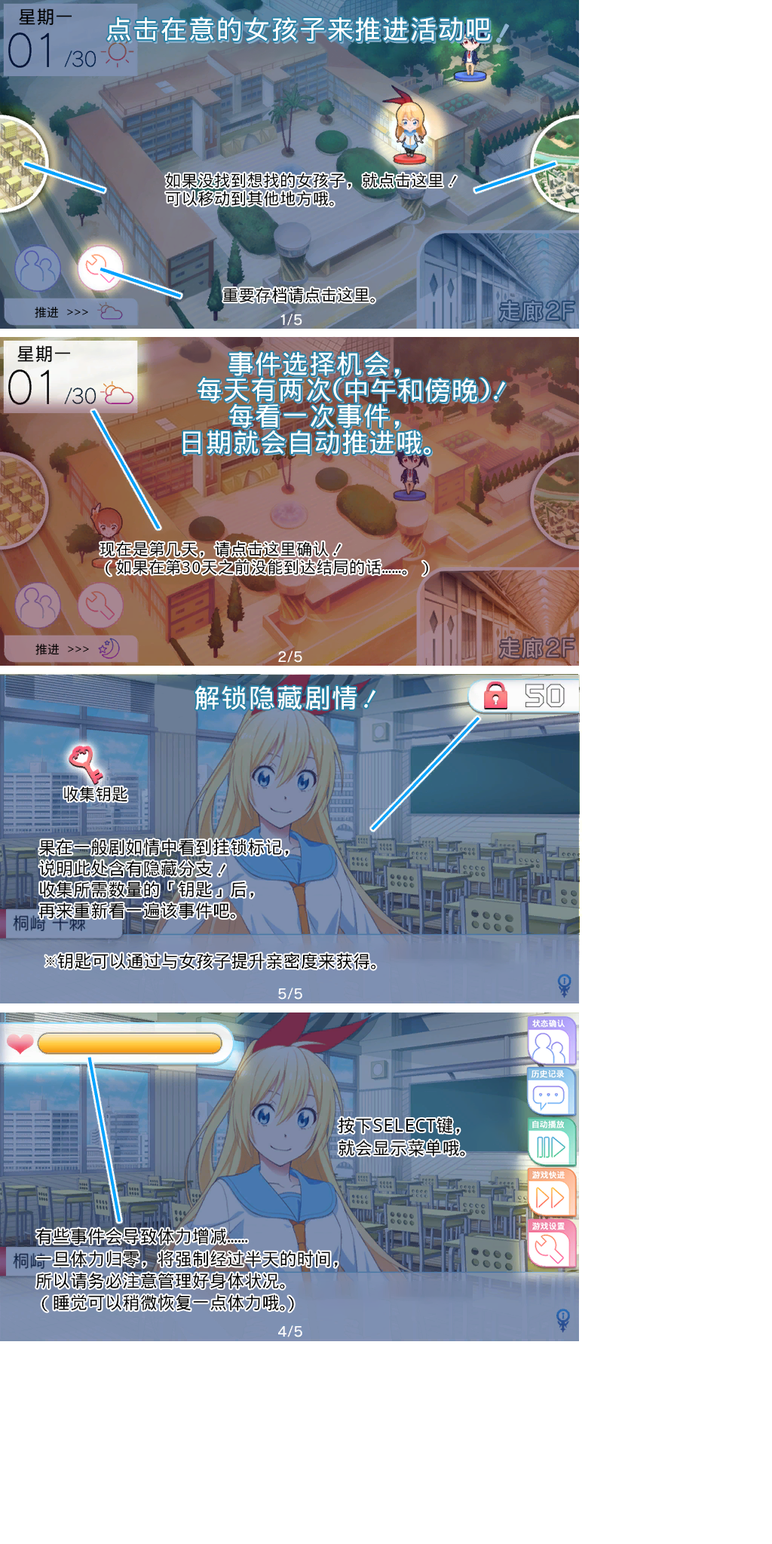
<style>
.page{position:relative;width:772px;height:1544px;background:#ffffff}
.page>*{position:absolute;margin:0}
.t1{font:18.1px "WenQuanYiMicroHeiMono";letter-spacing:0.02em;color:#000000}
.t2{font:26.1px "WenQuanYiMicroHeiMono";letter-spacing:0.06em;color:#ffffff}
.t3{font:26.1px "WenQuanYiMicroHeiMono";letter-spacing:0.1em;color:#8cb2ce}
.t4{font:16.1px/18.1px "WenQuanYiMicroHeiMono";letter-spacing:0.02em;color:#000000}
.t5{font:16.1px "WenQuanYiMicroHeiMono";letter-spacing:0.02em;color:#000000}
.t6{font:22.1px "WenQuanYiMicroHeiMono";letter-spacing:0.02em;color:#7b92b5}
.t7{font:12.1px "WenQuanYiMicroHeiMono";letter-spacing:0.02em;color:#000000}
.t8{font:26.1px/26.1px "WenQuanYiMicroHeiMono";letter-spacing:0.04em;color:#ffffff}
.t9{font:26.1px/26.1px "WenQuanYiMicroHeiMono";letter-spacing:0.04em}
.t10{font:26.1px "WenQuanYiMicroHeiMono";letter-spacing:0.04em;color:#ffffff}
.t11{font:26.1px "WenQuanYiMicroHeiMono";letter-spacing:0.1em;color:#ffffff}
.t12{font:26.1px "WenQuanYiMicroHeiMono";letter-spacing:0.1em}
.t13{font:17.1px "WenQuanYiMicroHeiMono";letter-spacing:0.02em;color:#000000}
.t14{font:22.1px "WenQuanYiMicroHeiMono";letter-spacing:0.02em;color:#a5868c}
.t15{font:17.1px/21.1px "WenQuanYiMicroHeiMono";letter-spacing:0.02em;color:#000000}
.t16{font:17.1px/22.1px "WenQuanYiMicroHeiMono";letter-spacing:0.02em;color:#000000}
</style>
<div class="page">
<p class="t1" style="left:19px;top:8px;width:53px;height:18px">星期一</p>
<p class="t2" style="left:107px;top:17px;width:384px;height:24px">点击在意的女孩子来推进活动吧</p>
<p class="t3" style="left:497px;top:24px;width:12px;height:18px;rotate:29deg">!</p>
<p class="t3" style="left:497px;top:24px;width:12px;height:18px;rotate:29deg">!</p>
<p class="t4" style="left:165px;top:173px;width:278px;height:34px">如果没找到想找的女孩子，就点击这里<br>可以移动到其他地方哦。</p>
<p class="t5" style="left:449px;top:176px;width:8px;height:11px;rotate:29deg">!</p>
<p class="t5" style="left:223px;top:287px;width:153px;height:16px">重要存档请点击这里。</p>
<p class="t6" style="left:500px;top:301px;width:42px;height:20px">走廊</p>
<p class="t7" style="left:35px;top:306px;width:53px;height:12px">推进 &gt;&gt;&gt;</p>
<p class="t1" style="left:17px;top:345px;width:54px;height:18px">星期一</p>
<p class="t8" style="left:183px;top:351px;width:248px;height:104px;text-align:center">事件选择机会，<br> 每天有两次<br>        每看一次事件，<br>       日期就会自动推进哦。</p>
<p class="t9" style="left:185px;top:353px;width:248px;height:103px;text-align:center">事件选择机会，<br> 每天有两次<br>        每看一次事件，<br>       日期就会自动推进哦。</p>
<p class="t10" style="left:345px;top:378px;width:132px;height:25px">中午和傍晚</p>
<p class="t11" style="left:494px;top:382px;width:12px;height:18px;rotate:29deg">!</p>
<p class="t12" style="left:495px;top:384px;width:12px;height:18px;rotate:29deg">!</p>
<p class="t4" style="left:100px;top:541px;width:328px;height:35px">现在是第几天，请点击这里确认<br>（如果在第30天之前没能到达结局的话……。）</p>
<p class="t13" style="left:333px;top:544px;width:9px;height:12px;rotate:29deg">!</p>
<p class="t14" style="left:500px;top:638px;width:42px;height:20px">走廊</p>
<p class="t7" style="left:35px;top:643px;width:54px;height:12px">推进 &gt;&gt;&gt;</p>
<p class="t2" style="left:195px;top:685px;width:162px;height:25px">解锁隐藏剧情</p>
<p class="t11" style="left:364px;top:690px;width:12px;height:18px;rotate:29deg">!</p>
<p class="t5" style="left:64px;top:786px;width:63px;height:16px">收集钥匙</p>
<p class="t15" style="left:38px;top:839px;width:251px;height:80px">果在一般剧如情中看到挂锁标记，<br>说明此处含有隐藏分支<br>收集所需数量的「钥匙」后，<br>再来重新看一遍该事件吧。</p>
<p class="t13" style="left:218px;top:864px;width:8px;height:12px;rotate:29deg">!</p>
<p class="t13" style="left:45px;top:953px;width:331px;height:17px">※钥匙可以通过与女孩子提升亲密度来获得。</p>
<p class="t16" style="left:338px;top:1118px;width:127px;height:39px">按下SELECT键，<br>就会显示菜单哦。</p>
<p class="t16" style="left:36px;top:1228px;width:302px;height:84px">有些事件会导致体力增减……<br>一旦体力归零，将强制经过半天的时间，<br>所以请务必注意管理好身体状况。<br>（睡觉可以稍微恢复一点体力哦。</p>
<p class="t13" style="left:288px;top:1296px;width:6px;height:16px;rotate:-2deg">)</p>
</div>
